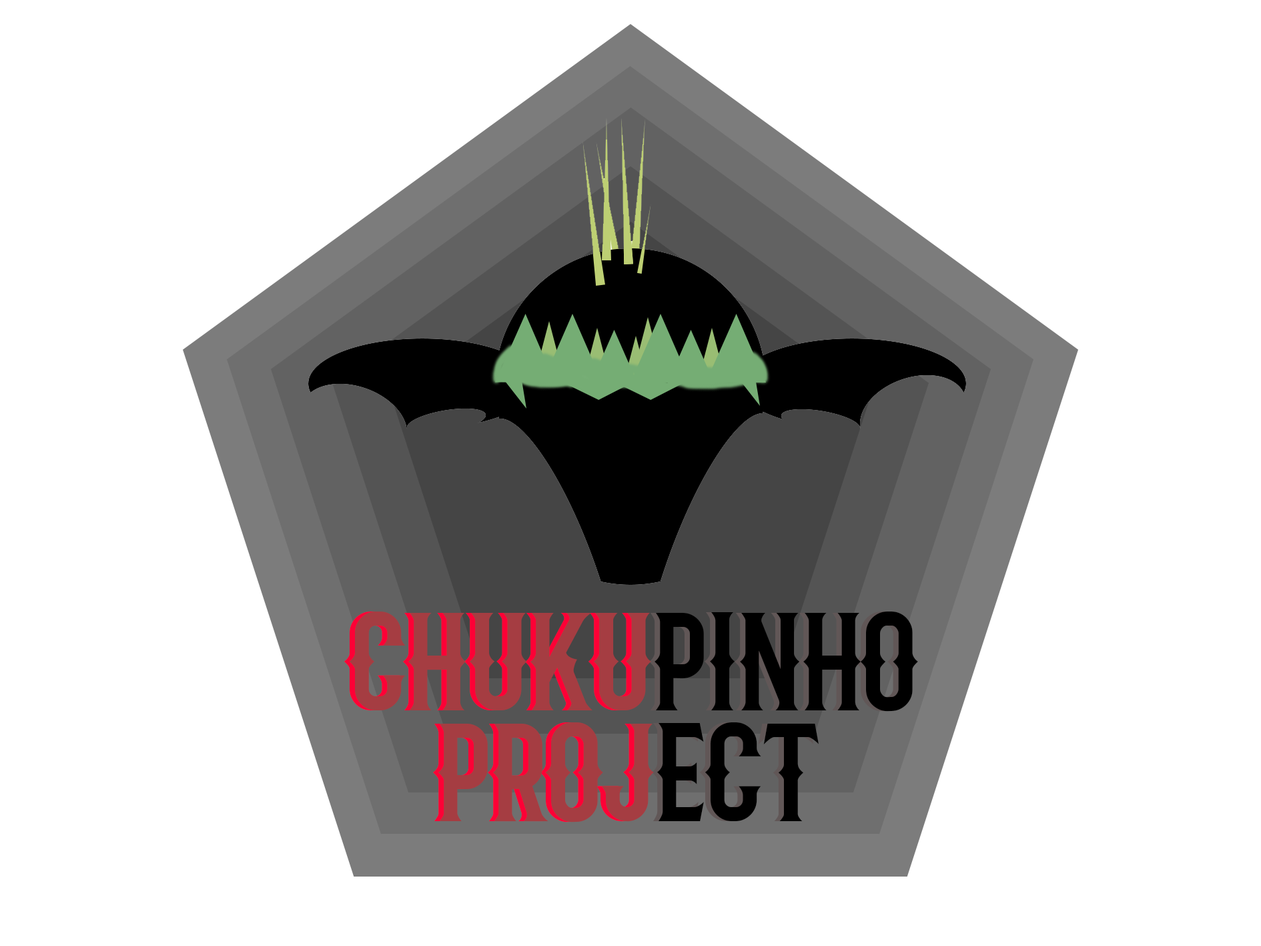
<style>
.page{position:relative;width:1261px;height:946px;background:#ffffff}
.page>*{position:absolute;margin:0}
.t1{font:133.5px "Barbaro-Western"}
.t2{font:133.5px "Barbaro-Western";color:#a53d42}
.t3{font:133.5px "Barbaro-Western";color:#000000}
</style>
<div class="page">
<p class="t1" style="left:344px;top:611px;width:569px;height:100px">CHUKUPINHO</p>
<p class="t2" style="left:349px;top:611px;width:569px;height:100px">CHUKU<span class="t3">PINHO</span></p>
<p class="t1" style="left:433px;top:722px;width:380px;height:100px">pROJECT</p>
<p class="t2" style="left:438px;top:722px;width:381px;height:100px">pROJ<span class="t3">ECT</span></p>
</div>
